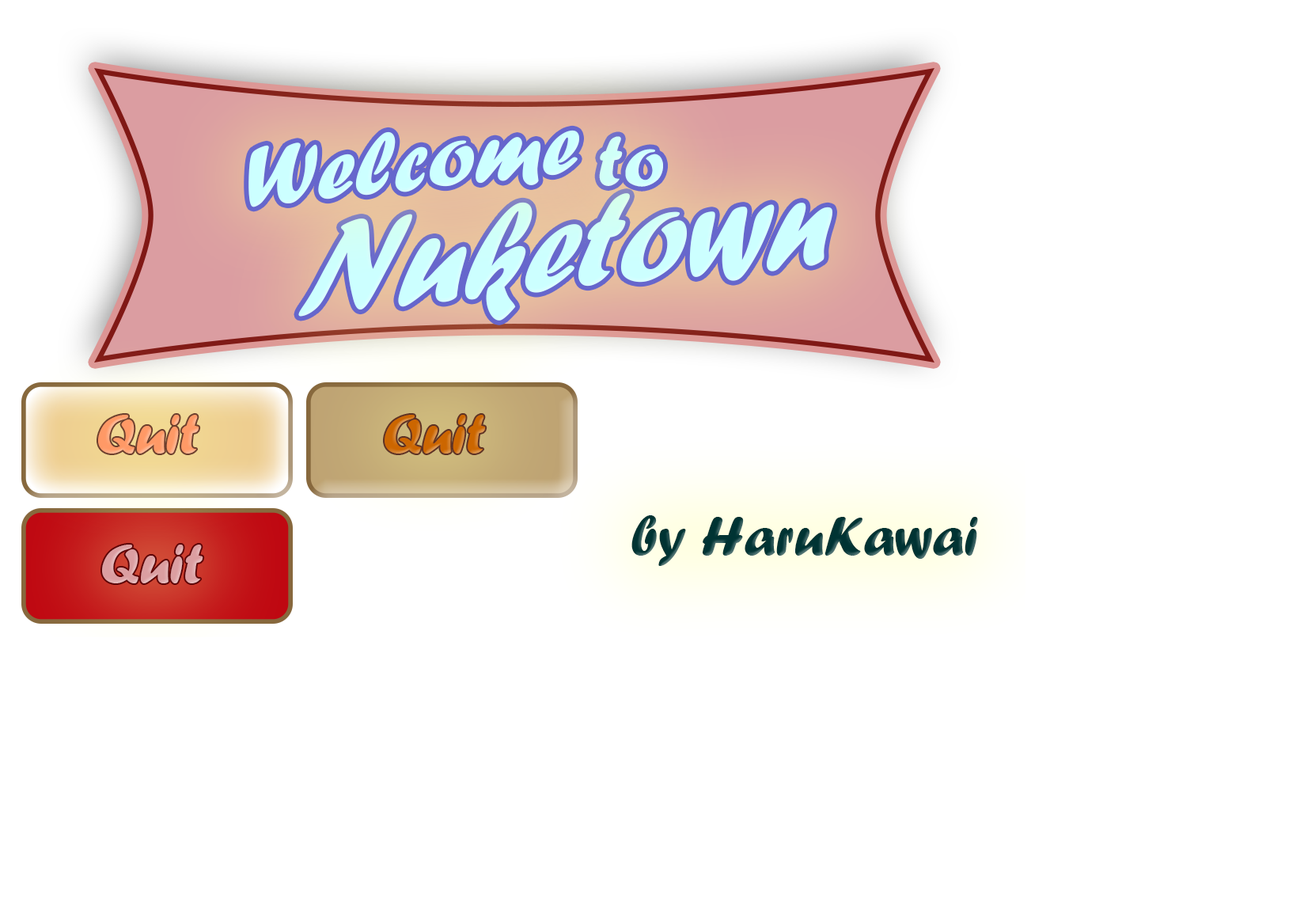
<style>
.page{position:relative;width:1304px;height:915px;background:#ffffff}
.page>*{position:absolute;margin:0}
.t1{font:90.4px "ForteMT";color:#ccffff}
.t2{font:75.8px "ForteMT";color:#ccffff}
.t3{font:142.7px "ForteMT";color:#ccffff;scale:0.86 1}
.t4{font:57px "ForteMT";color:#ff9966}
.t5{font:57px "ForteMT";color:#cc6600}
.t6{font:57px "ForteMT";color:#003333}
.t7{font:57px "ForteMT";color:#db9ea1}
</style>
<div class="page">
<p class="t1" style="left:248px;top:130px;width:331px;height:77px;rotate:-6deg">Welcome</p>
<p class="t2" style="left:599px;top:136px;width:64px;height:51px;rotate:-1deg">to</p>
<p class="t3" style="left:298px;top:193px;width:534px;height:127px;rotate:-6deg">Nuketown</p>
<p class="t4" style="left:98px;top:415px;width:101px;height:38px">Quit</p>
<p class="t5" style="left:384px;top:415px;width:102px;height:38px">Quit</p>
<p class="t6" style="left:631px;top:515px;width:347px;height:51px">by HaruKawai</p>
<p class="t7" style="left:102px;top:544px;width:101px;height:39px">Quit</p>
</div>
